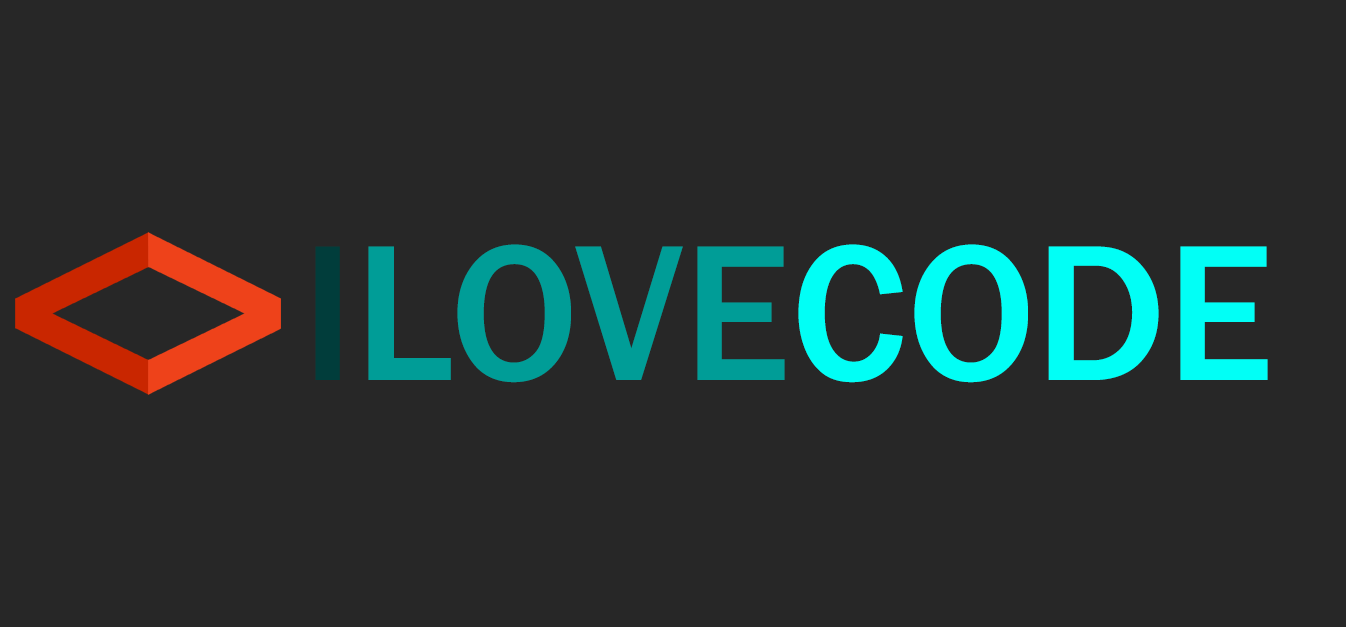
<style>
.page{position:relative;width:1346px;height:627px;background:#272727}
.page>*{position:absolute;margin:0}
.t1{font:200px "FranklinGothic-Medium";color:#009d97;text-transform:uppercase}
.t2{font:200px "FranklinGothic-Medium";color:#013d3b;text-transform:uppercase}
.t3{font:200px "FranklinGothic-Medium";color:#01fff6;text-transform:uppercase}
</style>
<div class="page">
<p class="t1" style="left:315px;top:244px;width:953px;height:139px"><span class="t2">I</span>Love<span class="t3">Code</span></p>
</div>
